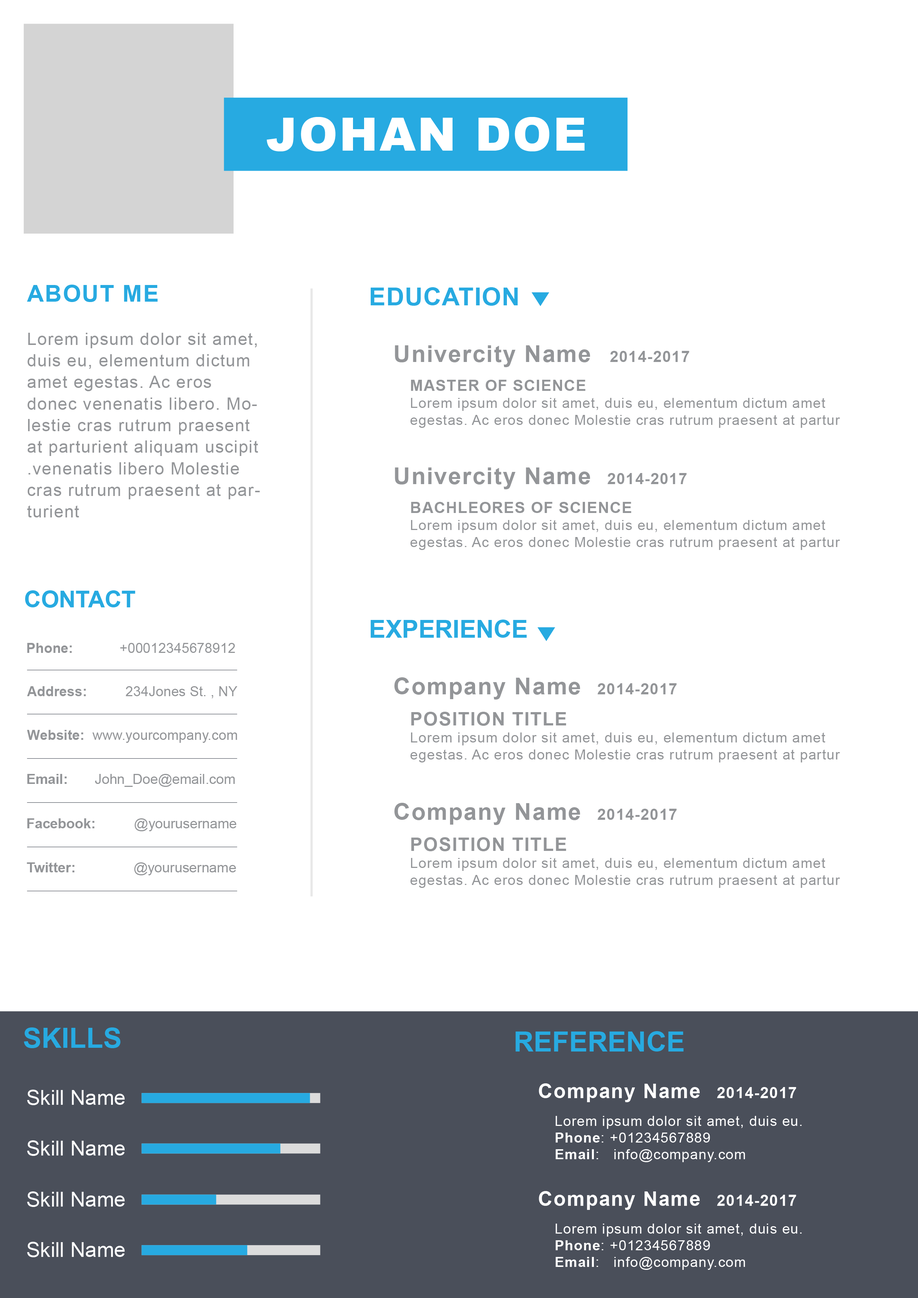
<style>
.page{position:relative;width:918px;height:1298px;background:#ffffff}
.page>*{position:absolute;margin:0}
.t1{font:46.3px "Arial-Black";letter-spacing:0.04em;color:#ffffff}
.t2{font:17px/21.6px "ArialMT";letter-spacing:0.05em;color:#939598}
.t3{font:23.1px/21.6px "Arial-BoldMT";letter-spacing:0.05em;color:#27aae1}
.t4{font:24.7px "Arial-BoldMT";letter-spacing:0.03em;color:#27aae1}
.t5{font:23.1px "Arial-BoldMT";letter-spacing:0.05em;color:#939598}
.t6{font:15.4px "Arial-BoldMT";letter-spacing:0.05em;color:#939598}
.t7{font:13.9px/17px "ArialMT";letter-spacing:0.05em;color:#939598}
.t8{font:15.4px/3.7px "Arial-BoldMT";letter-spacing:0.05em;color:#939598}
.t9{font:23.1px "Arial-BoldMT";color:#27aae1}
.t10{font:24.7px "Arial-BoldMT";color:#27aae1}
.t11{font:13.9px "ArialMT";color:#939598}
.t12{font:13.9px "Arial-BoldMT";color:#939598}
.t13{font:18.5px/3.7px "Arial-BoldMT";letter-spacing:0.05em;color:#939598}
.t14{font:27.8px "Arial-BoldMT";color:#27aae1}
.t15{font:20.1px "Arial-BoldMT";letter-spacing:0.05em;color:#ffffff}
.t16{font:15.4px "Arial-BoldMT";letter-spacing:0.05em;color:#ffffff}
.t17{font:20.8px "ArialMT";color:#ffffff}
.t18{font:13.9px "ArialMT";letter-spacing:0.05em;color:#ffffff}
.t19{font:13.9px "Arial-BoldMT";letter-spacing:0.05em;color:#ffffff}
</style>
<div class="page">
<p class="t1" style="left:267px;top:117px;width:318px;height:34px">JOHAN DOE</p>
<p class="t2" style="left:27px;top:285px;width:233px;height:233px"><span class="t3">ABOUT ME<br><br></span>Lorem ipsum dolor sit amet, duis eu, elementum dictum amet egestas. Ac eros donec venenatis libero. Molestie cras rutrum praesent at parturient aliquam uscipit .venenatis libero Molestie cras rutrum praesent at parturient</p>
<p class="t4" style="left:371px;top:287px;width:147px;height:19px">EDUCATION</p>
<p class="t5" style="left:395px;top:345px;width:295px;height:22px">Univercity Name <span class="t6">  2014-2017</span></p>
<p class="t7" style="left:411px;top:380px;width:430px;height:48px"><span class="t8">MASTER OF SCIENCE<br></span>Lorem ipsum dolor sit amet, duis eu, elementum dictum amet egestas. Ac eros donec Molestie cras rutrum praesent at partur</p>
<p class="t5" style="left:395px;top:468px;width:292px;height:21px">Univercity Name<span class="t6">   2014-2017</span></p>
<p class="t7" style="left:411px;top:502px;width:430px;height:48px"><span class="t8">BACHLEORES OF SCIENCE<br></span>Lorem ipsum dolor sit amet, duis eu, elementum dictum amet egestas. Ac eros donec Molestie cras rutrum praesent at partur</p>
<p class="t9" style="left:25px;top:590px;width:110px;height:18px">CONTACT</p>
<p class="t10" style="left:371px;top:620px;width:156px;height:18px">EXPERIENCE</p>
<p class="t11" style="left:27px;top:643px;width:208px;height:10px"><span class="t12">Phone:</span>            +00012345678912</p>
<p class="t5" style="left:395px;top:677px;width:282px;height:23px">Company Name<span class="t6">   2014-2017</span></p>
<p class="t11" style="left:27px;top:686px;width:211px;height:13px"><span class="t12">Address:</span>          234Jones St. , NY</p>
<p class="t7" style="left:411px;top:712px;width:430px;height:51px"><span class="t13">POSITION TITLE<br></span>Lorem ipsum dolor sit amet, duis eu, elementum dictum amet egestas. Ac eros donec Molestie cras rutrum praesent at partur</p>
<p class="t11" style="left:27px;top:730px;width:210px;height:13px"><span class="t12">Website:</span>  www.yourcompany.com</p>
<p class="t11" style="left:27px;top:774px;width:208px;height:13px"><span class="t12">Email:</span>       John_Doe@email.com</p>
<p class="t5" style="left:395px;top:803px;width:282px;height:22px">Company Name<span class="t6">   2014-2017</span></p>
<p class="t11" style="left:27px;top:819px;width:210px;height:12px"><span class="t12">Facebook:</span>          @yourusername</p>
<p class="t7" style="left:411px;top:837px;width:430px;height:51px"><span class="t13">POSITION TITLE<br></span>Lorem ipsum dolor sit amet, duis eu, elementum dictum amet egestas. Ac eros donec Molestie cras rutrum praesent at partur</p>
<p class="t11" style="left:27px;top:863px;width:209px;height:13px"><span class="t12">Twitter:</span>               @yourusername</p>
<p class="t14" style="left:24px;top:1028px;width:97px;height:20px">SKILLS</p>
<p class="t14" style="left:516px;top:1031px;width:168px;height:21px">REFERENCE</p>
<p class="t15" style="left:539px;top:1084px;width:258px;height:18px">Company Name<span class="t16">   2014-2017</span></p>
<p class="t17" style="left:27px;top:1090px;width:98px;height:15px">Skill Name</p>
<p class="t18" style="left:556px;top:1116px;width:246px;height:46px">Lorem ipsum dolor sit amet, duis eu.<br><span class="t19">Phone</span>: +01234567889<br><span class="t19">Email</span>:   info@company.com</p>
<p class="t17" style="left:27px;top:1141px;width:98px;height:15px">Skill Name</p>
<p class="t17" style="left:27px;top:1192px;width:98px;height:15px">Skill Name</p>
<p class="t15" style="left:539px;top:1191px;width:258px;height:19px">Company Name<span class="t16">   2014-2017</span></p>
<p class="t18" style="left:556px;top:1224px;width:246px;height:46px">Lorem ipsum dolor sit amet, duis eu.<br><span class="t19">Phone</span>: +01234567889<br><span class="t19">Email</span>:   info@company.com</p>
<p class="t17" style="left:27px;top:1242px;width:98px;height:16px">Skill Name</p>
</div>
